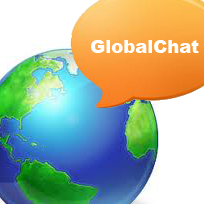
<style>
.page{position:relative;width:204px;height:204px;background:#ffffff}
.page>*{position:absolute;margin:0}
.t1{font:18px "Arial-Black";color:#ffffff}
</style>
<div class="page">
<p class="t1" style="left:91px;top:40px;width:108px;height:13px">GlobalChat</p>
</div>
